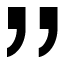
<style>
.page{position:relative;width:64px;height:64px;background:#ffffff}
.page>*{position:absolute;margin:0}
.t1{font:207px "HelveticaNeue-Light";color:#000000}
</style>
<div class="page">
<p class="t1" style="left:7px;top:7px;width:51px;height:50px">„</p>
</div>
